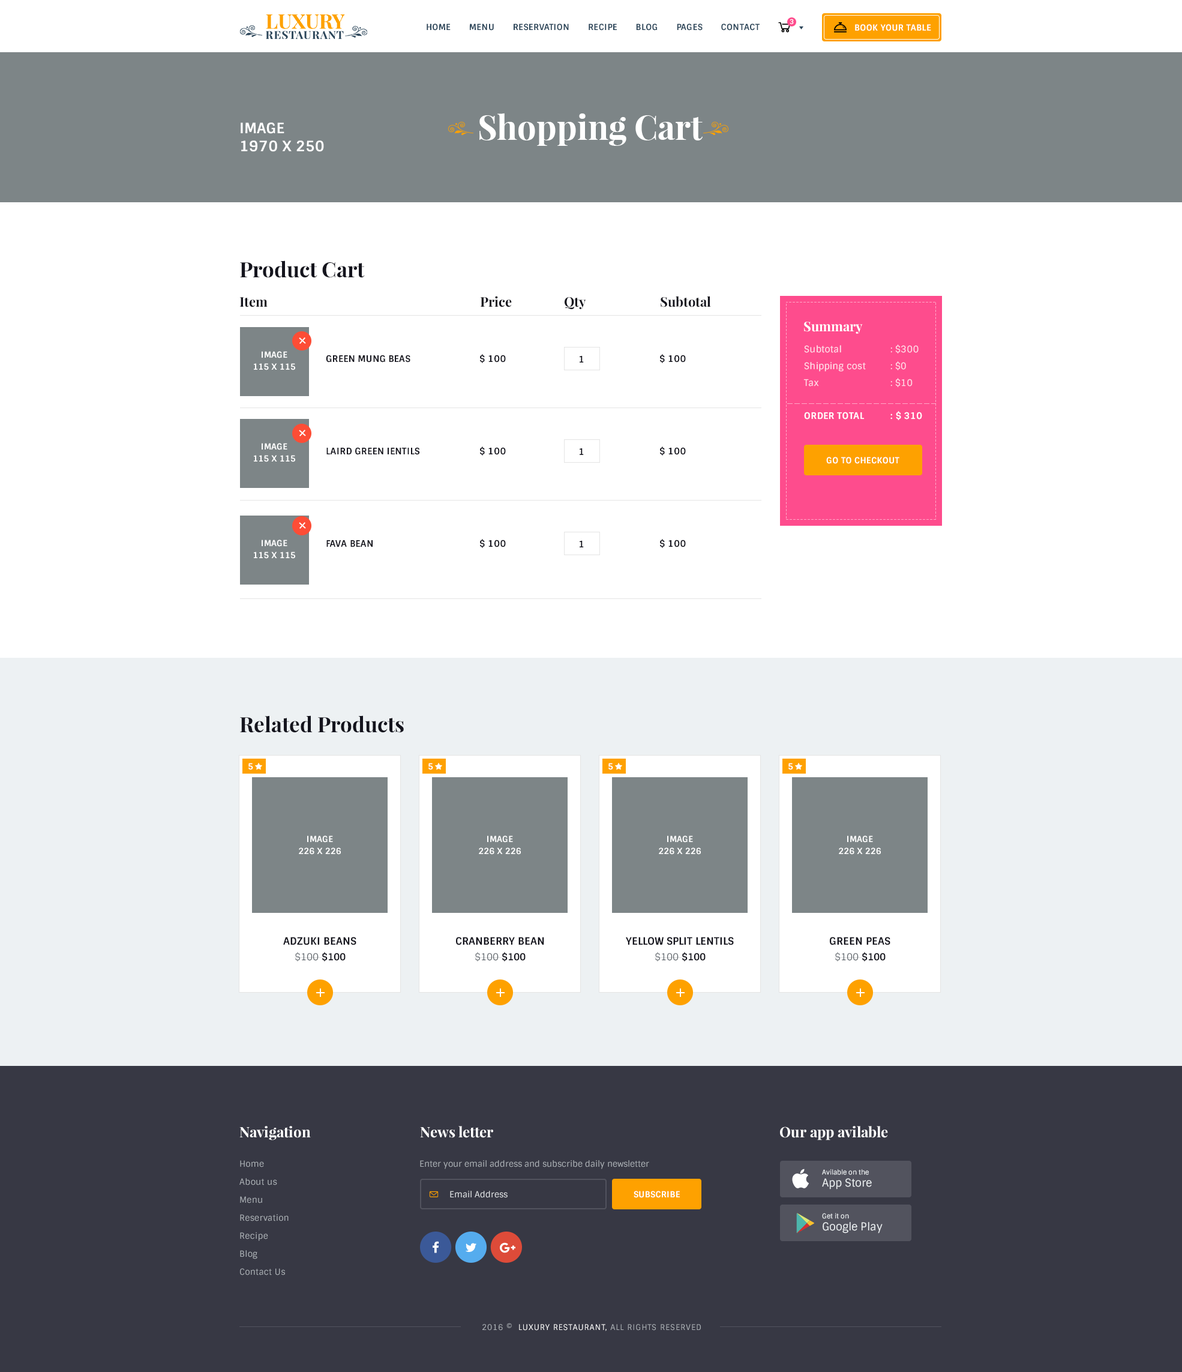
<style>
.page{position:relative;width:1182px;height:1372px;background:#ffffff}
.page>*{position:absolute;margin:0}
.t1{font:8.4px "Sintony-Bold";letter-spacing:0.025em;color:#2c465a;text-transform:uppercase}
.t2{font:6.6px "Sintony-Bold";letter-spacing:0.025em;color:#ffffff;text-transform:uppercase}
.t3{font:8.4px "Sintony-Bold";letter-spacing:0.025em;color:#ffffff;text-transform:uppercase}
.t4{font:33.6px "PlayfairDisplay-Bold";color:#ffffff}
.t5{font:14.4px/18px "Sintony-Bold";letter-spacing:0.005em;color:#ffffff;text-transform:uppercase}
.t6{font:21px "PlayfairDisplay-Bold";color:#14141d}
.t7{font:13.2px "PlayfairDisplay-Bold";color:#14141d}
.t8{font:13.2px "PlayfairDisplay-Bold";color:#ffffff}
.t9{font:8.4px/12px "Sintony-Bold";letter-spacing:0.005em;color:#ffffff;text-transform:uppercase}
.t10{font:9px/16.8px "Sintony";letter-spacing:0.025em;color:#ffdeea}
.t11{font:9px "Sintony-Bold";letter-spacing:0.025em;color:#14141d;text-transform:uppercase}
.t12{font:9px "Sintony-Bold";letter-spacing:0.025em;color:#ffffff;text-transform:uppercase}
.t13{font:8.4px "Sintony-Bold";color:#ffffff;text-transform:uppercase}
.t14{font:10.2px "Sintony-Bold";color:#14141d;text-transform:uppercase}
.t15{font:9.6px "Sintony";color:#5c6369}
.t16{font:9.6px "Sintony-Bold";color:#14141d}
.t17{font:14.4px "PlayfairDisplay-Bold";color:#ffffff}
.t18{font:8.4px/18px "Sintony";letter-spacing:0.025em;color:#adb2b7}
.t19{font:8.4px "Sintony";color:#adb2b7}
.t20{font:6.6px/12px "Sintony";color:#edf1f3}
.t21{font:10.8px/12px "Sintony";color:#edf1f3}
.t22{font:8.4px "Sintony";color:#e6e9eb}
.t23{font:7.8px "Sintony";letter-spacing:0.075em;color:#adb2b7;text-transform:uppercase}
.t24{font:7.8px "Sintony";letter-spacing:0.075em;color:#ffffff;text-transform:uppercase}
</style>
<div class="page">
<p class="t1" style="left:427px;top:23px;width:333px;height:8px">Home       menu       reservation       recipe       blog       Pages       contact</p>
<p class="t2" style="left:790px;top:19px;width:4px;height:6px">3</p>
<p class="t3" style="left:855px;top:24px;width:76px;height:7px">Book your table</p>
<p class="t4" style="left:479px;top:113px;width:224px;height:33px">Shopping Cart</p>
<p class="t5" style="left:241px;top:122px;width:83px;height:30px">Image<br>1970 x 250</p>
<p class="t6" style="left:240px;top:260px;width:125px;height:18px">Product Cart</p>
<p class="t7" style="left:239px;top:297px;width:29px;height:10px">Item</p>
<p class="t7" style="left:480px;top:296px;width:32px;height:11px">Price</p>
<p class="t7" style="left:565px;top:297px;width:21px;height:13px">Qty</p>
<p class="t7" style="left:661px;top:296px;width:50px;height:11px">Subtotal</p>
<p class="t8" style="left:804px;top:322px;width:59px;height:12px">Summary</p>
<p class="t9" style="left:254px;top:351px;width:41px;height:19px;text-align:center">Image<br>115 x 115</p>
<p class="t10" style="left:803px;top:344px;width:116px;height:43px">Subtotal   : $300<br>Shipping cost  : $0<br>Tax    : $10</p>
<p class="t11" style="left:326px;top:355px;width:84px;height:7px">green mung beas</p>
<p class="t11" style="left:480px;top:354px;width:26px;height:9px">$ 100</p>
<p class="t11" style="left:580px;top:356px;width:4px;height:6px">1</p>
<p class="t11" style="left:660px;top:354px;width:26px;height:9px">$ 100</p>
<p class="t12" style="left:804px;top:411px;width:118px;height:9px">Order Total  : $ 310</p>
<p class="t9" style="left:254px;top:443px;width:41px;height:19px;text-align:center">Image<br>115 x 115</p>
<p class="t11" style="left:326px;top:447px;width:94px;height:8px">laird green ientils</p>
<p class="t11" style="left:480px;top:446px;width:26px;height:9px">$ 100</p>
<p class="t11" style="left:580px;top:448px;width:4px;height:7px">1</p>
<p class="t11" style="left:660px;top:446px;width:26px;height:9px">$ 100</p>
<p class="t3" style="left:826px;top:457px;width:73px;height:7px">go to checkout</p>
<p class="t9" style="left:254px;top:539px;width:41px;height:20px;text-align:center">Image<br>115 x 115</p>
<p class="t11" style="left:326px;top:540px;width:47px;height:7px">Fava bean</p>
<p class="t11" style="left:480px;top:539px;width:26px;height:9px">$ 100</p>
<p class="t11" style="left:580px;top:541px;width:4px;height:6px">1</p>
<p class="t11" style="left:660px;top:539px;width:26px;height:9px">$ 100</p>
<p class="t6" style="left:240px;top:715px;width:164px;height:18px">Related Products</p>
<p class="t13" style="left:248px;top:763px;width:5px;height:7px">5</p>
<p class="t13" style="left:428px;top:763px;width:5px;height:7px">5</p>
<p class="t13" style="left:608px;top:763px;width:5px;height:7px">5</p>
<p class="t13" style="left:788px;top:763px;width:5px;height:7px">5</p>
<p class="t9" style="left:299px;top:835px;width:42px;height:19px;text-align:center">Image<br>226 x 226</p>
<p class="t9" style="left:479px;top:835px;width:42px;height:19px;text-align:center">Image<br>226 x 226</p>
<p class="t9" style="left:659px;top:835px;width:42px;height:19px;text-align:center">Image<br>226 x 226</p>
<p class="t9" style="left:839px;top:835px;width:42px;height:19px;text-align:center">Image<br>226 x 226</p>
<p class="t14" style="left:283px;top:937px;width:73px;height:8px">adzuki beans</p>
<p class="t14" style="left:456px;top:937px;width:88px;height:8px">cranberry bean</p>
<p class="t14" style="left:626px;top:937px;width:108px;height:8px">Yellow split lentils</p>
<p class="t14" style="left:830px;top:937px;width:60px;height:8px">green peas</p>
<p class="t15" style="left:295px;top:952px;width:51px;height:9px">$100 <span class="t16">$100</span></p>
<p class="t15" style="left:475px;top:952px;width:51px;height:9px">$100 <span class="t16">$100</span></p>
<p class="t15" style="left:655px;top:952px;width:51px;height:9px">$100 <span class="t16">$100</span></p>
<p class="t15" style="left:835px;top:952px;width:51px;height:9px">$100 <span class="t16">$100</span></p>
<p class="t17" style="left:239px;top:1126px;width:72px;height:14px">Navigation</p>
<p class="t17" style="left:420px;top:1126px;width:73px;height:12px">News letter</p>
<p class="t17" style="left:780px;top:1126px;width:108px;height:14px">Our app avilable</p>
<p class="t18" style="left:239px;top:1160px;width:50px;height:115px">Home<br>About us<br>Menu<br>Reservation<br>Recipe<br>Blog<br>Contact Us</p>
<p class="t19" style="left:420px;top:1160px;width:229px;height:9px">Enter your email address and subscribe daily newsletter</p>
<p class="t20" style="left:822px;top:1169px;width:50px;height:20px">Avilable on the<br><span class="t21">App Store</span></p>
<p class="t22" style="left:450px;top:1190px;width:58px;height:8px">Email Address</p>
<p class="t3" style="left:634px;top:1190px;width:46px;height:8px">Subscribe</p>
<p class="t21" style="left:822px;top:1213px;width:61px;height:20px"><span class="t20">Get it on<br></span>Google Play</p>
<p class="t23" style="left:482px;top:1322px;width:219px;height:9px">2016 ©  <span class="t24">Luxury RestaurAnt,</span> All rights reserved</p>
</div>
